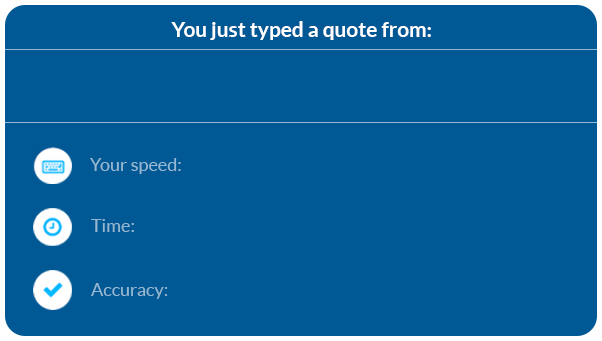
<style>
.page{position:relative;width:602px;height:341px;background:#005995}
.page>*{position:absolute;margin:0}
.t1{font:20.8px "Lato-Bold";color:#ffffff}
.t2{font:18px "Lato-Regular";color:#94b8d2}
</style>
<div class="page">
<p class="t1" style="left:171px;top:21px;width:260px;height:19px">You just typed a quote from:</p>
<p class="t2" style="left:90px;top:158px;width:91px;height:16px">Your speed:</p>
<p class="t2" style="left:91px;top:219px;width:43px;height:13px">Time:</p>
<p class="t2" style="left:91px;top:283px;width:77px;height:16px">Accuracy:</p>
</div>
